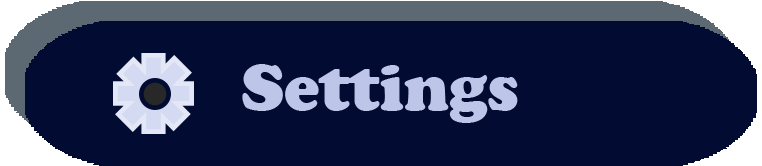
<style>
.page{position:relative;width:762px;height:166px;background:#020c33}
.page>*{position:absolute;margin:0}
.t1{font:66.7px "CooperBlack";color:#d4daf1}
</style>
<div class="page">
<p class="t1" style="left:242px;top:64px;width:276px;height:59px">Settings</p>
</div>
